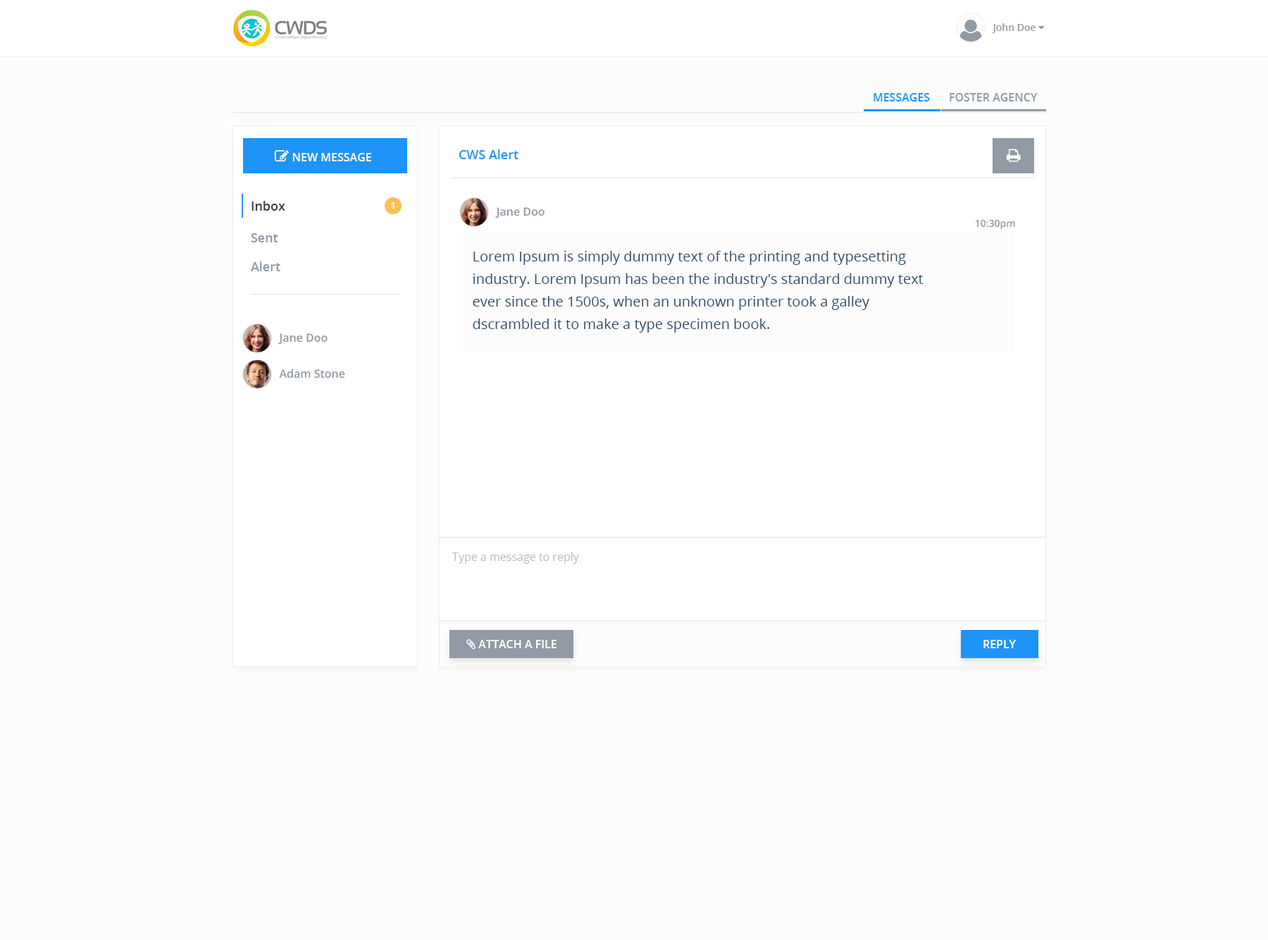
<style>
.page{position:relative;width:1268px;height:940px;background:#fcfcfc}
.page>*{position:absolute;margin:0}
.t1{font:11.3px "OpenSans-Semibold";color:#1e94f8;text-transform:uppercase}
.t2{font:11.3px "OpenSans-Semibold";color:#919aa5;text-transform:uppercase}
.t3{font:12.7px "OpenSans-Semibold";color:#1e94f8}
.t4{font:12.7px "OpenSans-Semibold";color:#393d41}
.t5{font:9.9px "OpenSans-Semibold";color:#ffffff}
.t6{font:11.3px "OpenSans-Semibold";color:#919aa5}
.t7{font:9.9px "OpenSans-Semibold";color:#919aa5}
.t8{font:12.7px "OpenSans-Semibold";color:#919aa5}
.t9{font:14.1px/22.6px "OpenSans";color:#304d6a}
.t10{font:11.3px "OpenSans";color:#b6bcc2}
.t11{font:11.3px "OpenSans-Semibold";color:#ffffff;text-transform:uppercase}
</style>
<div class="page">
<p class="t1" style="left:874px;top:93px;width:56px;height:8px">Messages</p>
<p class="t2" style="left:950px;top:93px;width:88px;height:8px">foster agency</p>
<p class="t3" style="left:459px;top:149px;width:60px;height:10px">CWS Alert</p>
<p class="t4" style="left:252px;top:201px;width:33px;height:10px">Inbox</p>
<p class="t5" style="left:391px;top:202px;width:4px;height:7px">1</p>
<p class="t6" style="left:495px;top:207px;width:50px;height:11px">Jane Doo</p>
<p class="t7" style="left:975px;top:219px;width:40px;height:11px">10:30pm</p>
<p class="t8" style="left:251px;top:233px;width:27px;height:9px">Sent</p>
<p class="t9" style="left:473px;top:251px;width:451px;height:82px">Lorem Ipsum is simply dummy text of the printing and typesetting industry. Lorem Ipsum has been the industry's standard dummy text ever since the 1500s, when an unknown printer took a galley <br>dscrambled it to make a type specimen book.</p>
<p class="t8" style="left:251px;top:261px;width:29px;height:10px">Alert</p>
<p class="t6" style="left:278px;top:333px;width:50px;height:12px">Jane Doo</p>
<p class="t6" style="left:279px;top:369px;width:66px;height:9px">Adam Stone</p>
<p class="t10" style="left:452px;top:552px;width:127px;height:12px">Type a message to reply</p>
<p class="t11" style="left:984px;top:640px;width:32px;height:8px">Reply</p>
</div>
